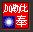
<style>
.page{position:relative;width:33px;height:32px;background:#f20000}
.page>*{position:absolute;margin:0}
.t1{font:10.4px "SimSun";letter-spacing:-0.25em;color:#ffffff}
.t2{font:11.7px "SimSun";color:#ffffff}
</style>
<div class="page">
<p class="t1" style="left:3px;top:4px;width:25px;height:9px">加勒比</p>
<p class="t2" style="left:16px;top:15px;width:11px;height:12px">奉</p>
</div>
